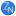
<style>
.page{position:relative;width:16px;height:16px;background:#ffffff}
.page>*{position:absolute;margin:0}
.t1{font:10px "MalgunGothicRegular";letter-spacing:-0.1em;color:#9abeea;font-weight:bold}
.t2{font:8px "MalgunGothicRegular";letter-spacing:-0.1em;color:#b5d1f1;font-weight:bold}
</style>
<div class="page">
<p class="t1" style="left:3px;top:2px;width:7px;height:8px">Z</p>
<p class="t2" style="left:8px;top:6px;width:5px;height:7px">N</p>
</div>
